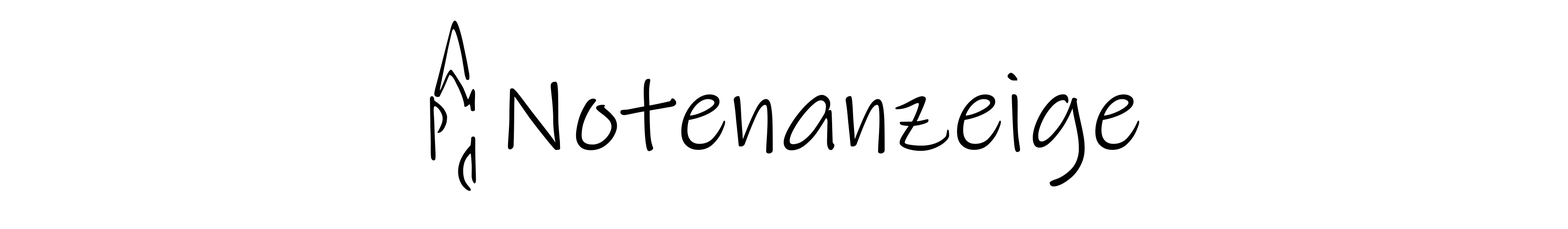
<style>
.page{position:relative;width:1568px;height:229px;background:#ffffff}
.page>*{position:absolute;margin:0}
.t1{font:112.9px "InkFree";color:#000000}
</style>
<div class="page">
<p class="t1" style="left:508px;top:73px;width:631px;height:114px">Notenanzeige</p>
</div>
